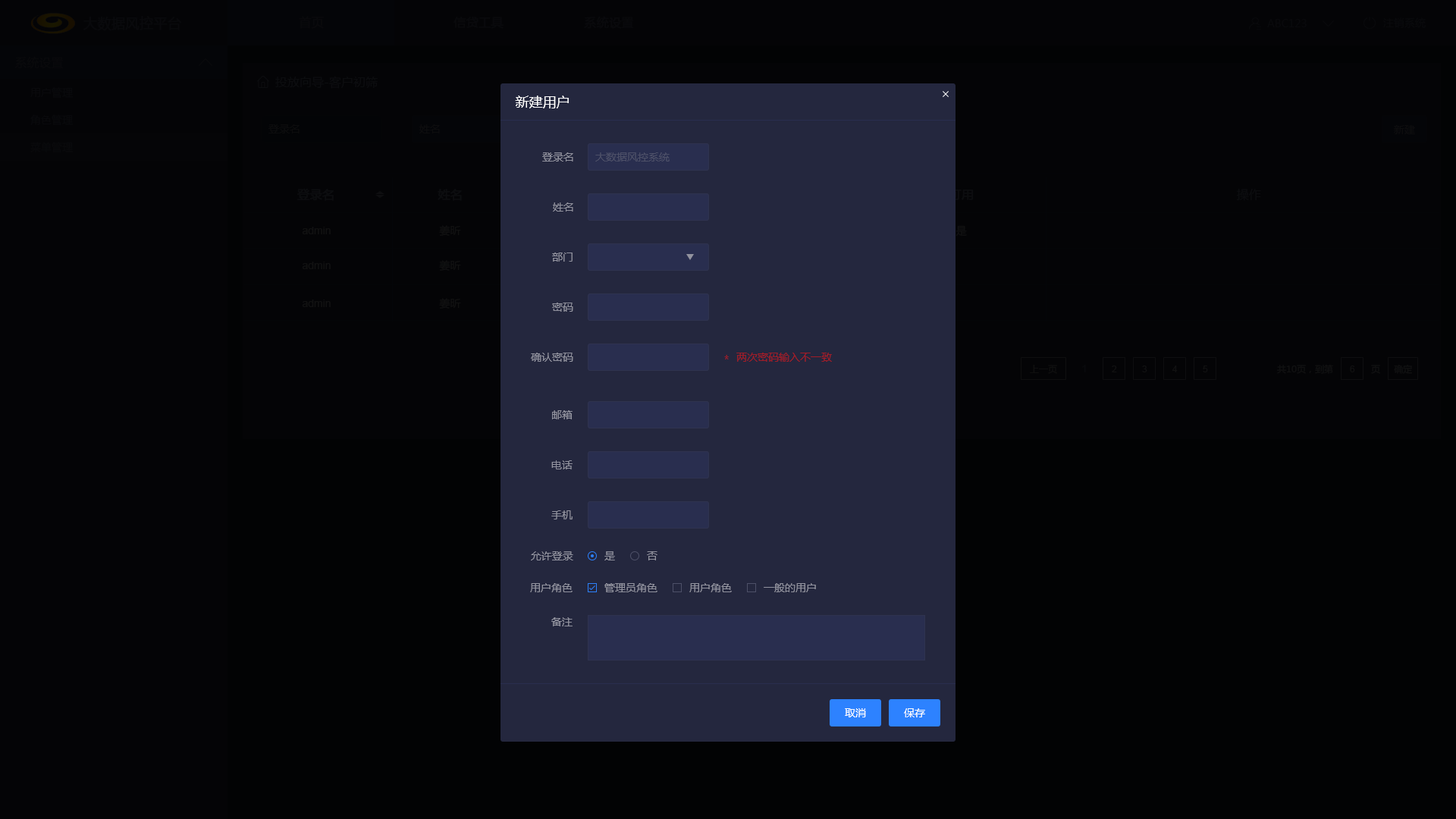
<style>
.page{position:relative;width:1456px;height:819px;background:#040406}
.page>*{position:absolute;margin:0}
.t1{font:13.6px "MicrosoftYaHei";color:#09090c;font-weight:bold}
.t2{font:12.1px "MicrosoftYaHei";color:#09090c;font-weight:bold}
.t3{font:10.6px "MicrosoftYaHei";color:#09090c}
.t4{font:12.1px "MicrosoftYaHei";color:#0c0d0f}
.t5{font:13.6px "MicrosoftYaHei";color:#ffffff}
.t6{font:10.6px "MicrosoftYaHei";color:#0c0c0d}
.t7{font:10.6px "MicrosoftYaHei";color:#0d0d0e}
.t8{font:10.6px "MicrosoftYaHei";color:#92939f}
.t9{font:10.6px "MicrosoftYaHei";color:#4d5068}
.t10{font:12.1px "MicrosoftYaHei";color:#0c0d0f;font-weight:bold}
.t11{font:10.6px "ArialMT";color:#111111}
.t12{font:10.6px "MicrosoftYaHei";color:#111111}
.t13{font:10.6px "MicrosoftYaHei";color:#a21c27}
.t14{font:9.1px "MicrosoftYaHei";color:#0f0f0f}
.t15{font:10.6px "ArialMT";color:#09090c}
.t16{font:9.1px "ArialMT";color:#111111}
.t17{font:9.1px "MicrosoftYaHei";color:#111111}
.t18{font:10.6px "MicrosoftYaHei";color:#ffffff}
</style>
<div class="page">
<p class="t1" style="left:83px;top:16px;width:98px;height:15px">大数据风控平台</p>
<p class="t2" style="left:299px;top:16px;width:25px;height:13px">首页</p>
<p class="t2" style="left:453px;top:17px;width:51px;height:12px">信贷工具</p>
<p class="t2" style="left:584px;top:16px;width:50px;height:13px">系统设置</p>
<p class="t3" style="left:1383px;top:17px;width:43px;height:11px">注销系统</p>
<p class="t3" style="left:1267px;top:19px;width:40px;height:8px">ABC123</p>
<p class="t4" style="left:275px;top:76px;width:103px;height:13px">投放向导-客户初筛</p>
<p class="t3" style="left:30px;top:87px;width:44px;height:12px">用户管理</p>
<p class="t5" style="left:515px;top:96px;width:54px;height:12px">新建用户</p>
<p class="t3" style="left:30px;top:115px;width:44px;height:11px">角色管理</p>
<p class="t6" style="left:268px;top:124px;width:32px;height:9px">登录名</p>
<p class="t7" style="left:419px;top:124px;width:21px;height:9px">姓名</p>
<p class="t7" style="left:1394px;top:125px;width:21px;height:9px">新建</p>
<p class="t8" style="left:542px;top:152px;width:31px;height:10px">登录名</p>
<p class="t9" style="left:595px;top:152px;width:75px;height:10px">大数据风控系统</p>
<p class="t10" style="left:297px;top:188px;width:37px;height:13px">登录名</p>
<p class="t10" style="left:438px;top:189px;width:24px;height:12px">姓名</p>
<p class="t4" style="left:1237px;top:188px;width:24px;height:13px">操作</p>
<p class="t8" style="left:553px;top:202px;width:20px;height:10px">姓名</p>
<p class="t11" style="left:302px;top:227px;width:29px;height:7px">admin</p>
<p class="t12" style="left:439px;top:225px;width:22px;height:11px">姜昕</p>
<p class="t12" style="left:955px;top:225px;width:12px;height:11px">是</p>
<p class="t8" style="left:552px;top:253px;width:21px;height:9px">部门</p>
<p class="t11" style="left:302px;top:262px;width:29px;height:7px">admin</p>
<p class="t12" style="left:439px;top:260px;width:22px;height:11px">姜昕</p>
<p class="t11" style="left:302px;top:300px;width:29px;height:7px">admin</p>
<p class="t12" style="left:439px;top:298px;width:22px;height:11px">姜昕</p>
<p class="t8" style="left:552px;top:303px;width:21px;height:9px">密码</p>
<p class="t8" style="left:531px;top:353px;width:42px;height:9px">确认密码</p>
<p class="t13" style="left:736px;top:353px;width:96px;height:9px">两次密码输入不一致</p>
<p class="t13" style="left:724px;top:355px;width:5px;height:4px">*</p>
<p class="t14" style="left:1030px;top:365px;width:27px;height:9px">上一页</p>
<p class="t15" style="left:1082px;top:365px;width:4px;height:7px">1</p>
<p class="t16" style="left:1112px;top:366px;width:5px;height:6px">2</p>
<p class="t16" style="left:1142px;top:366px;width:5px;height:6px">3</p>
<p class="t16" style="left:1172px;top:366px;width:6px;height:6px">4</p>
<p class="t16" style="left:1203px;top:366px;width:5px;height:6px">5</p>
<p class="t17" style="left:1277px;top:364px;width:56px;height:10px">共10页，到第</p>
<p class="t16" style="left:1350px;top:366px;width:5px;height:6px">6</p>
<p class="t17" style="left:1371px;top:365px;width:9px;height:9px">页</p>
<p class="t17" style="left:1394px;top:364px;width:18px;height:10px">确定</p>
<p class="t8" style="left:552px;top:410px;width:21px;height:9px">邮箱</p>
<p class="t8" style="left:551px;top:460px;width:22px;height:9px">电话</p>
<p class="t8" style="left:551px;top:510px;width:22px;height:9px">手机</p>
<p class="t8" style="left:531px;top:551px;width:42px;height:9px">允许登录</p>
<p class="t8" style="left:604px;top:551px;width:11px;height:9px">是</p>
<p class="t8" style="left:647px;top:551px;width:10px;height:9px">否</p>
<p class="t8" style="left:530px;top:583px;width:43px;height:9px">用户角色</p>
<p class="t8" style="left:604px;top:583px;width:53px;height:9px">管理员角色</p>
<p class="t8" style="left:689px;top:583px;width:43px;height:9px">用户角色</p>
<p class="t8" style="left:764px;top:583px;width:52px;height:9px">一般的用户</p>
<p class="t8" style="left:551px;top:617px;width:22px;height:9px">备注</p>
<p class="t18" style="left:845px;top:708px;width:21px;height:9px">取消</p>
<p class="t18" style="left:904px;top:708px;width:21px;height:9px">保存</p>
</div>
